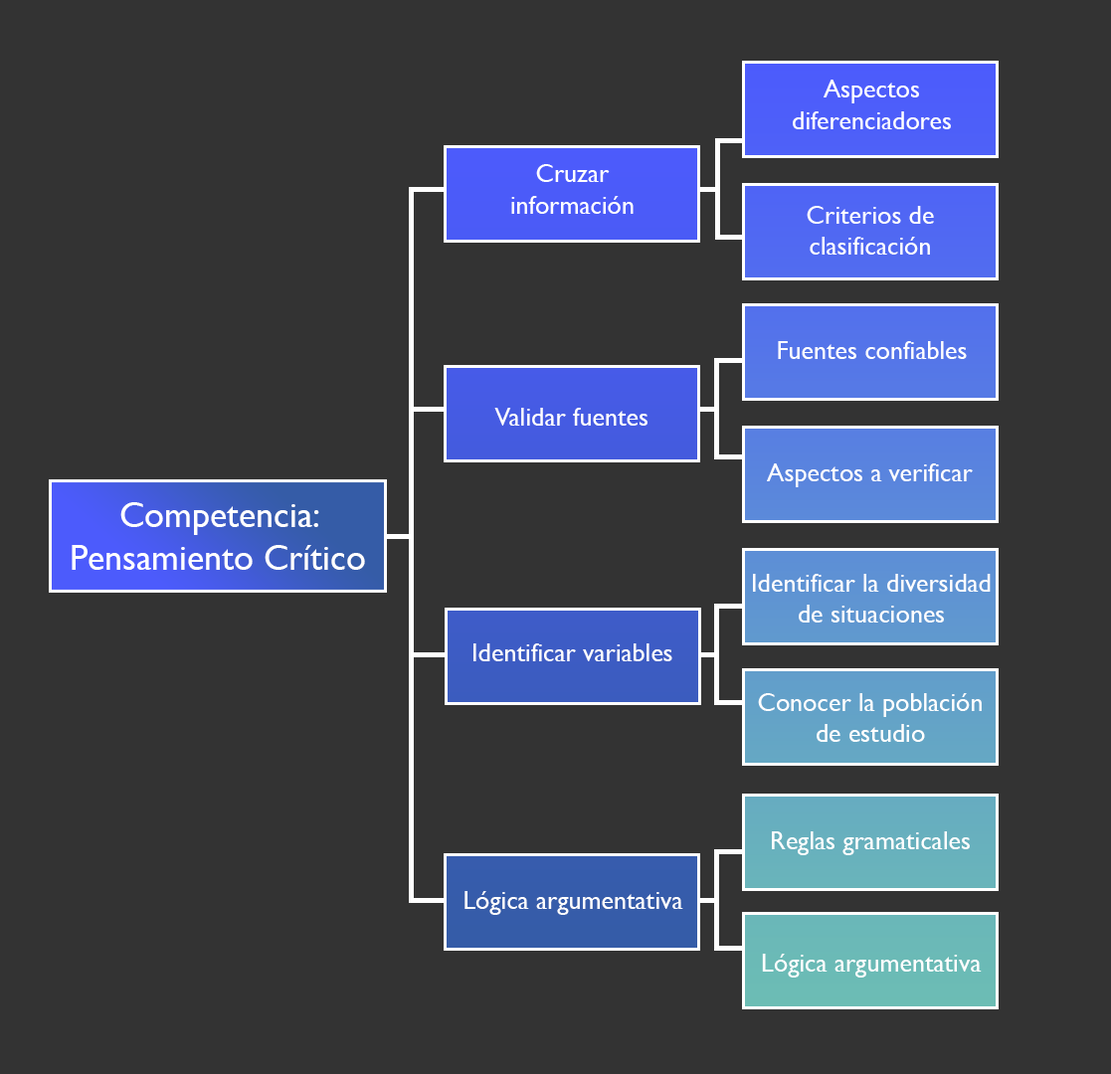
<style>
.page{position:relative;width:1111px;height:1074px;background:#333333}
.page>*{position:absolute;margin:0}
.t1{font:25.8px "GillSansMT";color:#ffffff}
.t2{font:35.8px "GillSansMT";color:#ffffff}
</style>
<div class="page">
<p class="t1" style="left:792px;top:80px;width:158px;height:49px;text-align:center">Aspectos<br>diferenciadores</p>
<p class="t1" style="left:511px;top:164px;width:122px;height:50px;text-align:center">Cruzar<br>información</p>
<p class="t1" style="left:806px;top:206px;width:128px;height:49px;text-align:center">Criterios de<br>clasificación</p>
<p class="t1" style="left:777px;top:341px;width:189px;height:18px">Fuentes confiables</p>
<p class="t1" style="left:494px;top:408px;width:153px;height:18px">Validar fuentes</p>
<p class="t1" style="left:767px;top:463px;width:205px;height:24px">Aspectos a verificar</p>
<p class="t2" style="left:72px;top:502px;width:293px;height:68px;text-align:center">Competencia:<br>Pensamiento Crítico</p>
<p class="t1" style="left:753px;top:574px;width:237px;height:48px;text-align:center">Identificar la diversidad<br>de situaciones</p>
<p class="t1" style="left:473px;top:643px;width:199px;height:18px">Identificar variables</p>
<p class="t1" style="left:758px;top:693px;width:223px;height:49px;text-align:center">Conocer la población<br>de estudio</p>
<p class="t1" style="left:772px;top:831px;width:197px;height:24px">Reglas gramaticales</p>
<p class="t1" style="left:464px;top:891px;width:219px;height:24px">Lógica argumentativa</p>
<p class="t1" style="left:762px;top:953px;width:219px;height:24px">Lógica argumentativa</p>
</div>
